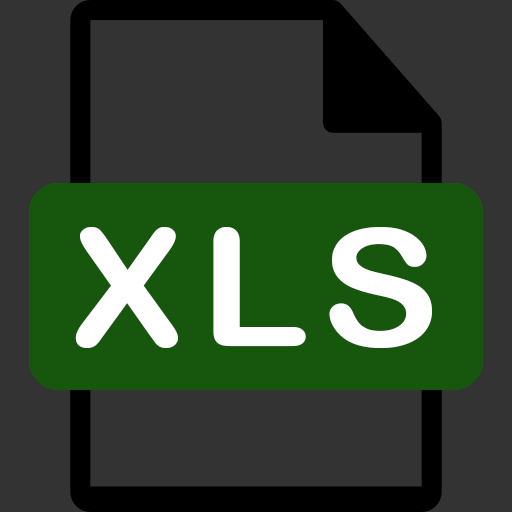
<style>
.page{position:relative;width:512px;height:512px;background:#333333}
.page>*{position:absolute;margin:0}
.t1{font:163.3px "ArialRoundedMTBold";letter-spacing:0.1em;color:#ffffff;scale:1.1 1}
</style>
<div class="page">
<p class="t1" style="left:75px;top:227px;width:357px;height:121px">XLS</p>
</div>
